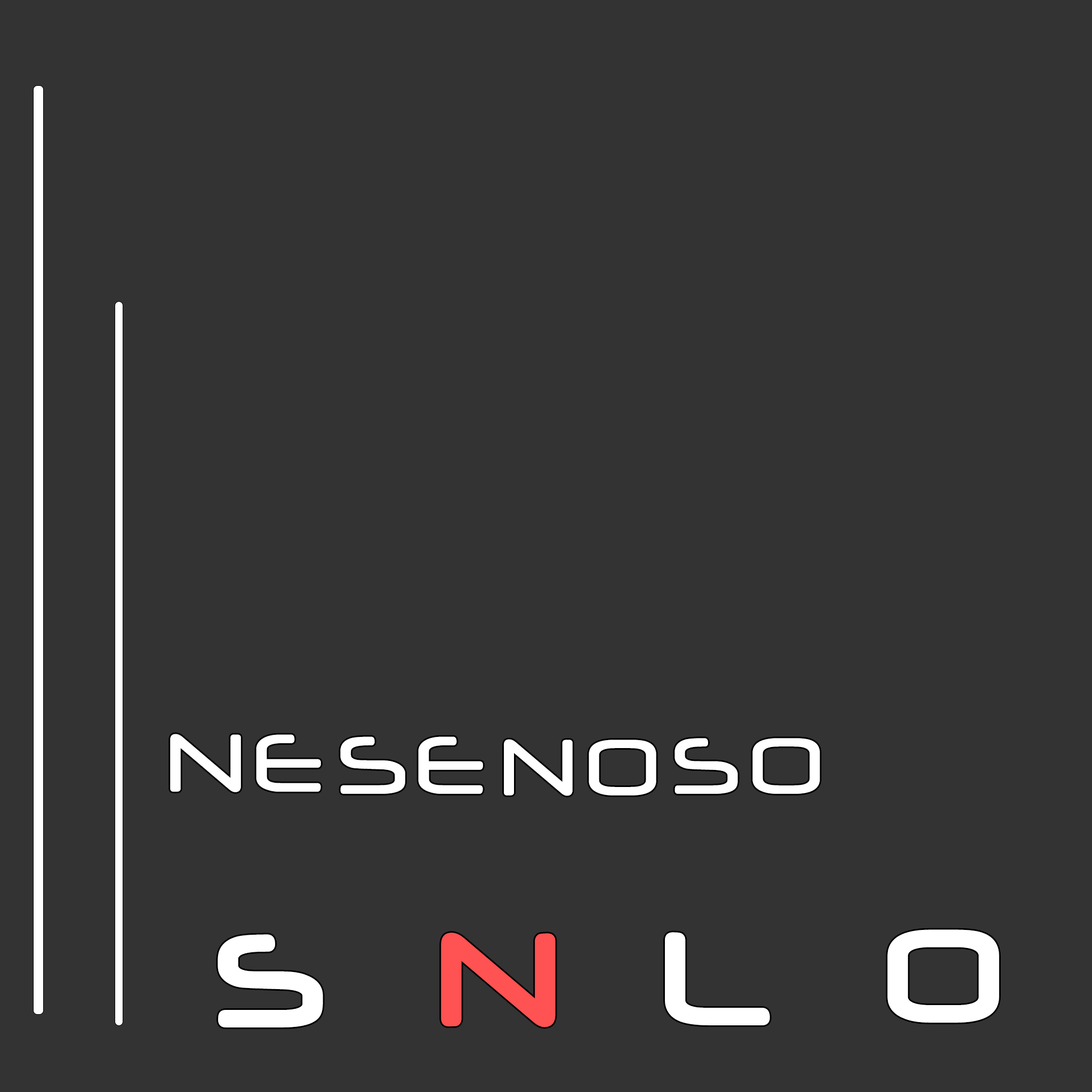
<style>
.page{position:relative;width:1092px;height:1092px;background:#333333}
.page>*{position:absolute;margin:0}
.t1{font:96px "Neuropol";letter-spacing:0.1em;color:#ffffff;text-transform:uppercase}
.t2{font:93.3px "Neuropol";letter-spacing:0.1em;color:#ffffff;text-transform:uppercase}
.t3{font:149.3px "Neuropol";letter-spacing:0.1em;color:#ffffff;text-transform:uppercase;font-weight:bold}
.t4{font:149.3px "Neuropol";letter-spacing:0.1em;color:#ff5252;text-transform:uppercase;font-weight:bold}
</style>
<div class="page">
<p class="t1" style="left:170px;top:734px;width:151px;height:58px">NE</p>
<p class="t1" style="left:340px;top:736px;width:143px;height:58px">sE</p>
<p class="t2" style="left:674px;top:738px;width:146px;height:56px">SO</p>
<p class="t2" style="left:503px;top:739px;width:153px;height:57px">NO</p>
<p class="t3" style="left:887px;top:929px;width:112px;height:94px">O</p>
<p class="t3" style="left:218px;top:934px;width:105px;height:93px">S</p>
<p class="t4" style="left:441px;top:933px;width:115px;height:94px">N</p>
<p class="t3" style="left:665px;top:932px;width:105px;height:93px">L</p>
</div>
